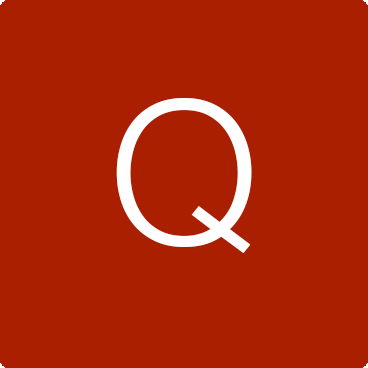
<style>
.page{position:relative;width:368px;height:368px;background:#aa1f00}
.page>*{position:absolute;margin:0}
.t1{font:200px "HelveticaNeue-Light";color:#ffffff}
</style>
<div class="page">
<p class="t1" style="left:116px;top:98px;width:136px;height:155px">Q</p>
</div>
